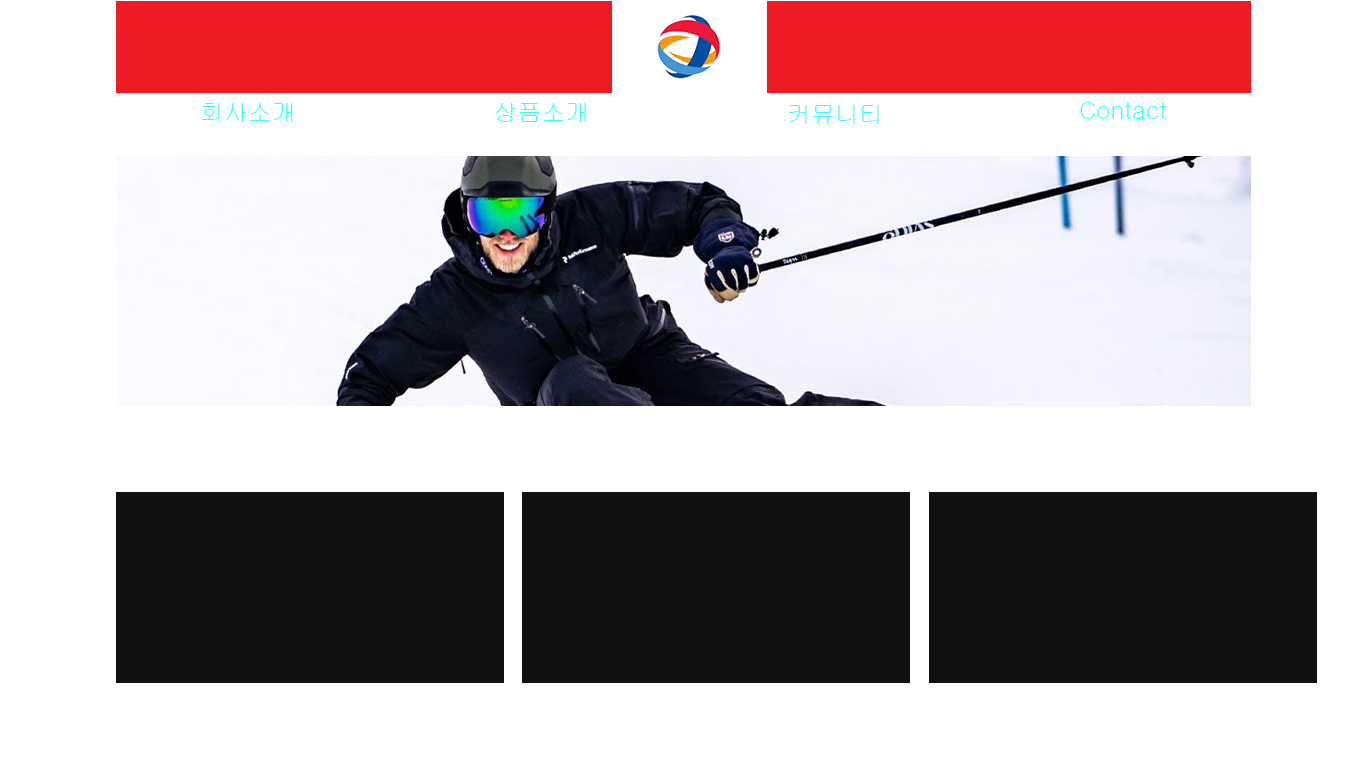
<style>
.page{position:relative;width:1366px;height:768px;background:#ffffff}
.page>*{position:absolute;margin:0}
.t1{font:24px "Gulim";color:#33ffff}
</style>
<div class="page">
<p class="t1" style="left:1080px;top:102px;width:87px;height:17px">Contact</p>
<p class="t1" style="left:202px;top:103px;width:91px;height:19px">회사소개</p>
<p class="t1" style="left:495px;top:103px;width:91px;height:19px">상품소개</p>
<p class="t1" style="left:789px;top:105px;width:90px;height:19px">커뮤니티</p>
</div>
